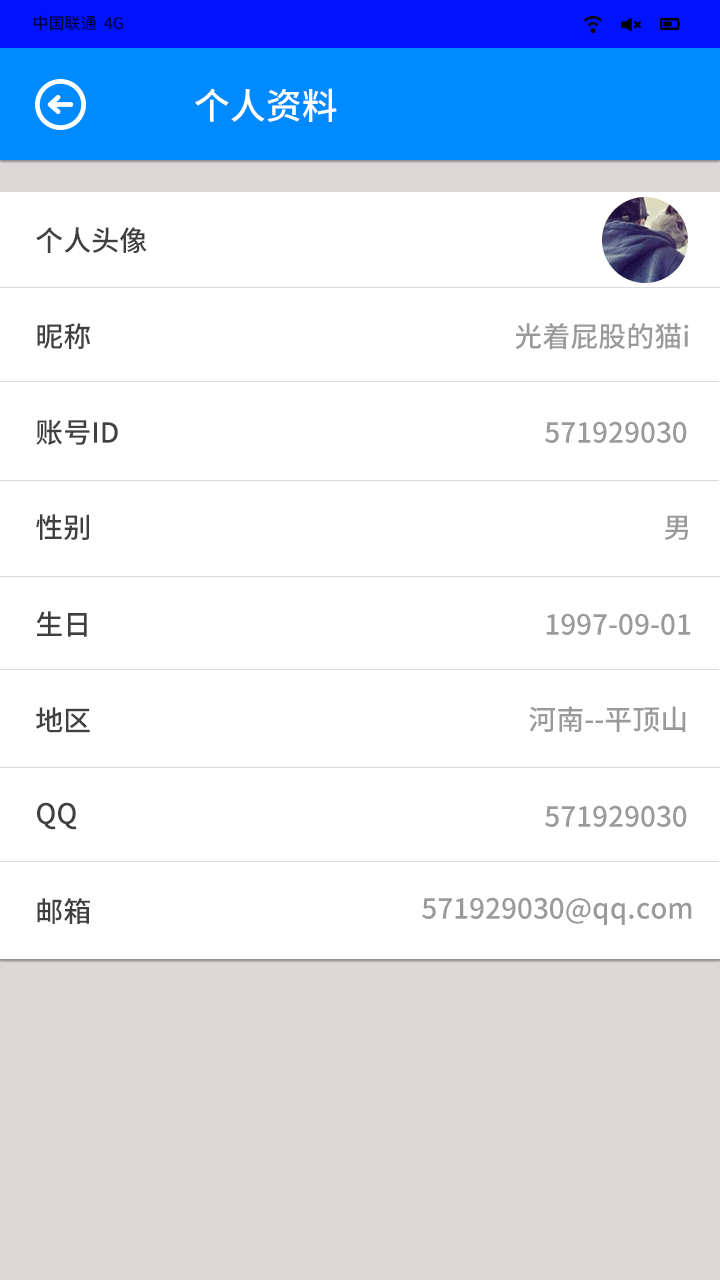
<style>
.page{position:relative;width:720px;height:1280px;background:#ffffff}
.page>*{position:absolute;margin:0}
.t1{font:16px "SourceHanSansCN-Medium";color:#000240}
.t2{font:36px "SourceHanSansCN-Medium";color:#ffffff}
.t3{font:28px "SourceHanSansCN-Medium";color:#404040}
.t4{font:28px "SourceHanSansCN-Medium";color:#9a9a9a}
</style>
<div class="page">
<p class="t1" style="left:34px;top:15px;width:89px;height:16px">中国联通  4G</p>
<p class="t2" style="left:195px;top:88px;width:142px;height:34px">个人资料</p>
<p class="t3" style="left:36px;top:227px;width:111px;height:26px">个人头像</p>
<p class="t3" style="left:37px;top:323px;width:53px;height:26px">昵称</p>
<p class="t4" style="left:515px;top:323px;width:174px;height:27px">光着屁股的猫i</p>
<p class="t3" style="left:36px;top:419px;width:82px;height:27px">账号ID</p>
<p class="t4" style="left:545px;top:421px;width:142px;height:22px">571929030</p>
<p class="t3" style="left:36px;top:514px;width:53px;height:26px">性别</p>
<p class="t4" style="left:664px;top:515px;width:24px;height:25px">男</p>
<p class="t3" style="left:36px;top:611px;width:51px;height:26px">生日</p>
<p class="t4" style="left:546px;top:613px;width:145px;height:22px">1997-09-01</p>
<p class="t3" style="left:36px;top:707px;width:54px;height:26px">地区</p>
<p class="t4" style="left:529px;top:706px;width:157px;height:27px">河南--平顶山</p>
<p class="t3" style="left:37px;top:802px;width:40px;height:28px">QQ</p>
<p class="t4" style="left:545px;top:805px;width:142px;height:22px">571929030</p>
<p class="t3" style="left:37px;top:898px;width:53px;height:26px">邮箱</p>
<p class="t4" style="left:422px;top:897px;width:270px;height:28px">571929030@qq.com</p>
</div>
